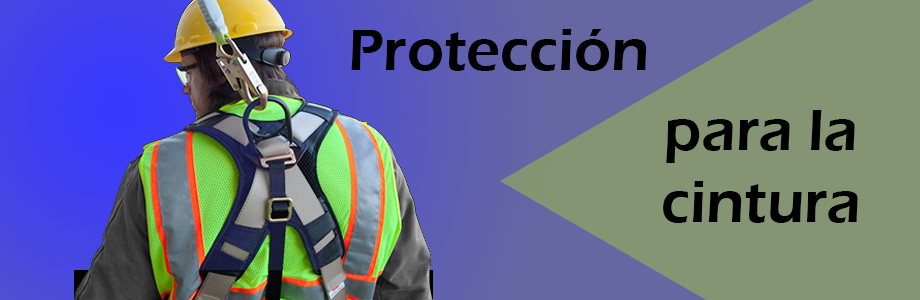
<style>
.page{position:relative;width:920px;height:300px;background:#859472}
.page>*{position:absolute;margin:0}
.t1{font:60px "ErasITC-Demi";color:#000000}
</style>
<div class="page">
<p class="t1" style="left:351px;top:29px;width:296px;height:42px">Protección</p>
<p class="t1" style="left:663px;top:110px;width:195px;height:113px;text-align:center">para la<br>cintura</p>
</div>
